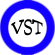
<style>
.page{position:relative;width:55px;height:55px;background:#ffffff}
.page>*{position:absolute;margin:0}
.t1{font:12px "MinionPro-Regular";color:#000000;scale:1.52 1}
</style>
<div class="page">
<p class="t1" style="left:11px;top:19px;width:32px;height:17px">VST</p>
</div>
